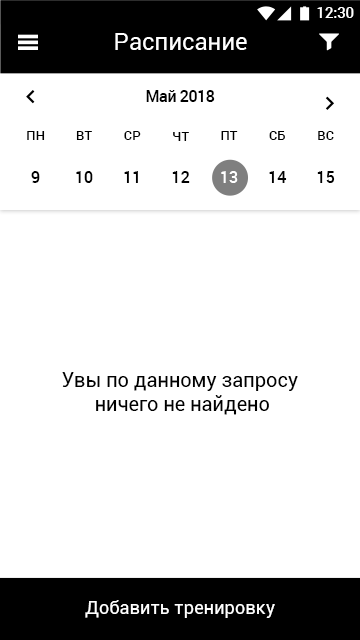
<style>
.page{position:relative;width:360px;height:640px;background:#ffffff}
.page>*{position:absolute;margin:0}
.t1{font:14.7px "Roboto-Medium";color:#ffffff}
.t2{font:24px "Roboto-Regular";color:#ffffff}
.t3{font:16px "Roboto-Medium";letter-spacing:-0.023em;color:#000000}
.t4{font:13.3px "Roboto-Medium";color:#000000}
.t5{font:16px "Roboto-Medium";color:#000000}
.t6{font:16px "Roboto-Medium";color:#ffffff}
.t7{font:20px "Roboto-Regular";color:#000000}
.t8{font:18.3px "Roboto-Regular";color:#ffffff}
</style>
<div class="page">
<p class="t1" style="left:317px;top:7px;width:37px;height:11px">12:30</p>
<p class="t2" style="left:115px;top:33px;width:132px;height:17px">Расписание</p>
<p class="t3" style="left:146px;top:90px;width:69px;height:12px">Май 2018</p>
<p class="t4" style="left:27px;top:131px;width:18px;height:9px">ПН</p>
<p class="t4" style="left:76px;top:131px;width:16px;height:9px">ВТ</p>
<p class="t4" style="left:124px;top:131px;width:17px;height:9px">СР</p>
<p class="t4" style="left:173px;top:132px;width:16px;height:9px">ЧТ</p>
<p class="t4" style="left:221px;top:131px;width:17px;height:9px">ПТ</p>
<p class="t4" style="left:269px;top:131px;width:16px;height:9px">СБ</p>
<p class="t4" style="left:318px;top:131px;width:16px;height:9px">ВС</p>
<p class="t5" style="left:31px;top:171px;width:9px;height:12px">9</p>
<p class="t5" style="left:76px;top:171px;width:17px;height:12px">10</p>
<p class="t5" style="left:124px;top:171px;width:14px;height:12px">11</p>
<p class="t5" style="left:172px;top:171px;width:18px;height:12px">12</p>
<p class="t6" style="left:221px;top:171px;width:17px;height:12px">13</p>
<p class="t5" style="left:269px;top:171px;width:18px;height:12px">14</p>
<p class="t5" style="left:317px;top:171px;width:18px;height:12px">15</p>
<p class="t7" style="left:62px;top:372px;width:236px;height:43px;text-align:center">Увы по данному запросу <br>ничего не найдено</p>
<p class="t8" style="left:85px;top:600px;width:190px;height:18px">Добавить тренировку</p>
</div>
